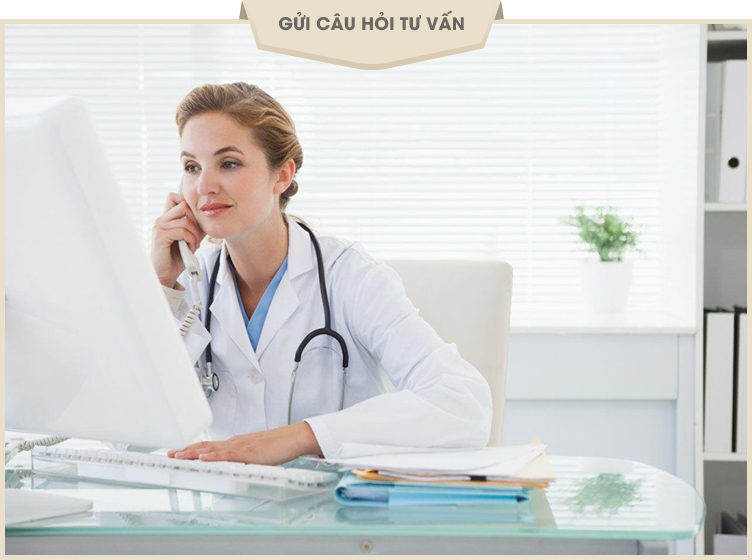
<style>
.page{position:relative;width:752px;height:560px}
.page>*{position:absolute;margin:0}
.t1{font:17.3px "UTMAvoBold";color:#6b6863;text-transform:uppercase}
</style>
<div class="page">
<p class="t1" style="left:278px;top:10px;width:186px;height:21px">Gửi câu hỏi tư vấn</p>
</div>
